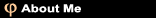
<style>
.page{position:relative;width:156px;height:18px;background:#000000}
.page>*{position:absolute;margin:0}
.t1{font:11px "Arial-BoldMT";color:#ffffff;scale:1.2 1}
</style>
<div class="page">
<p class="t1" style="left:21px;top:4px;width:60px;height:9px">About Me</p>
</div>
